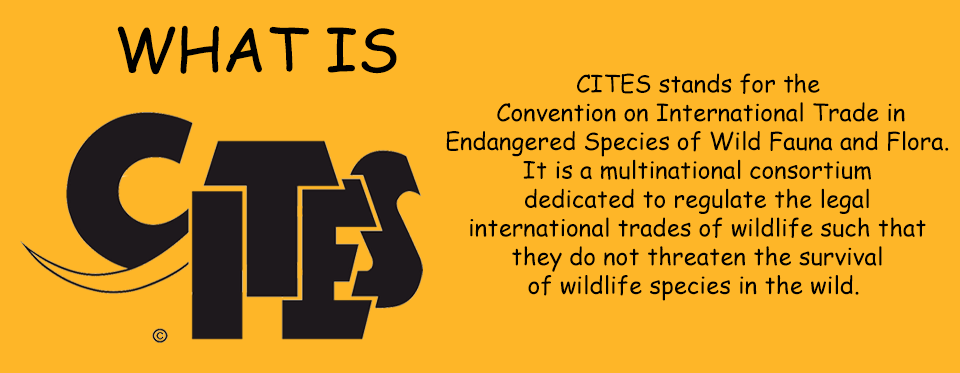
<style>
.page{position:relative;width:960px;height:373px;background:#feb628}
.page>*{position:absolute;margin:0}
.t1{font:60px "ComicSansMS";color:#000000}
.t2{font:24px "ComicSansMS";color:#000000}
</style>
<div class="page">
<p class="t1" style="left:117px;top:25px;width:280px;height:50px">WHAT IS</p>
<p class="t2" style="left:446px;top:73px;width:503px;height:228px;text-align:center">CITES stands for the<br> Convention on International Trade in<br>Endangered Species of Wild Fauna and Flora.<br>It is a multinational consortium<br>dedicated to regulate the legal<br>international trades of wildlife such that<br>they do not threaten the survival<br>of wildlife species in the wild.</p>
</div>
